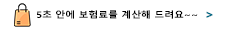
<style>
.page{position:relative;width:250px;height:30px;background:#ffffff}
.page>*{position:absolute;margin:0}
.t1{font:9px "MalgunGothicBold";letter-spacing:-0.005em;color:#000000;scale:1.1 1}
.t2{font:11px "MalgunGothicBold";letter-spacing:-0.005em;color:#006b86;font-weight:bold;scale:1.1 1}
</style>
<div class="page">
<p class="t1" style="left:37px;top:10px;width:176px;height:9px">5초 안에 보험료를 계산해 드려요~~  <span class="t2">&gt;</span></p>
</div>
